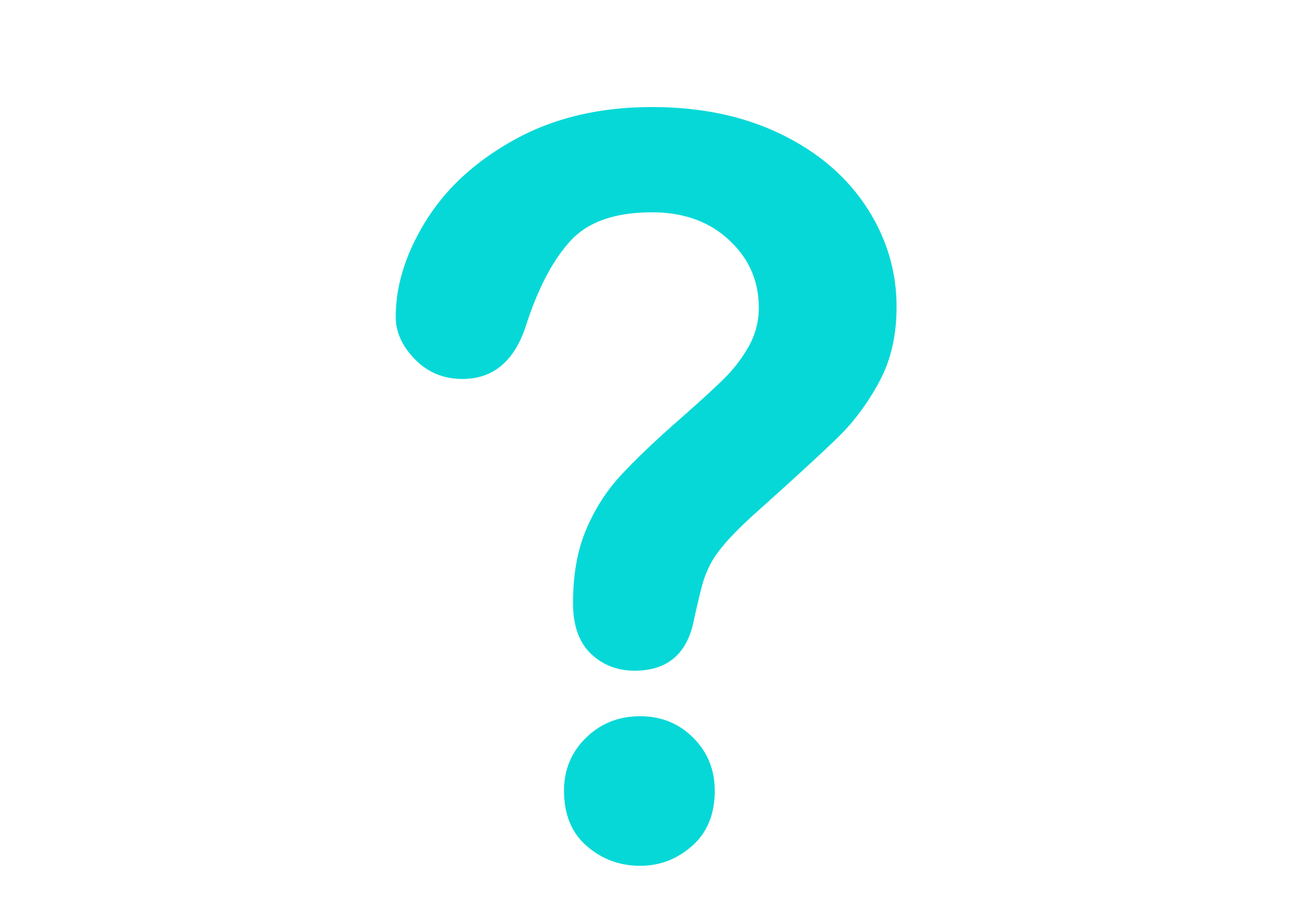
<style>
.page{position:relative;width:1292px;height:923px;background:#ffffff}
.page>*{position:absolute;margin:0}
.t1{font:1025.4px "ArialRoundedMTBold";color:#06d8d7}
</style>
<div class="page">
<p class="t1" style="left:396px;top:107px;width:501px;height:759px">?</p>
</div>
